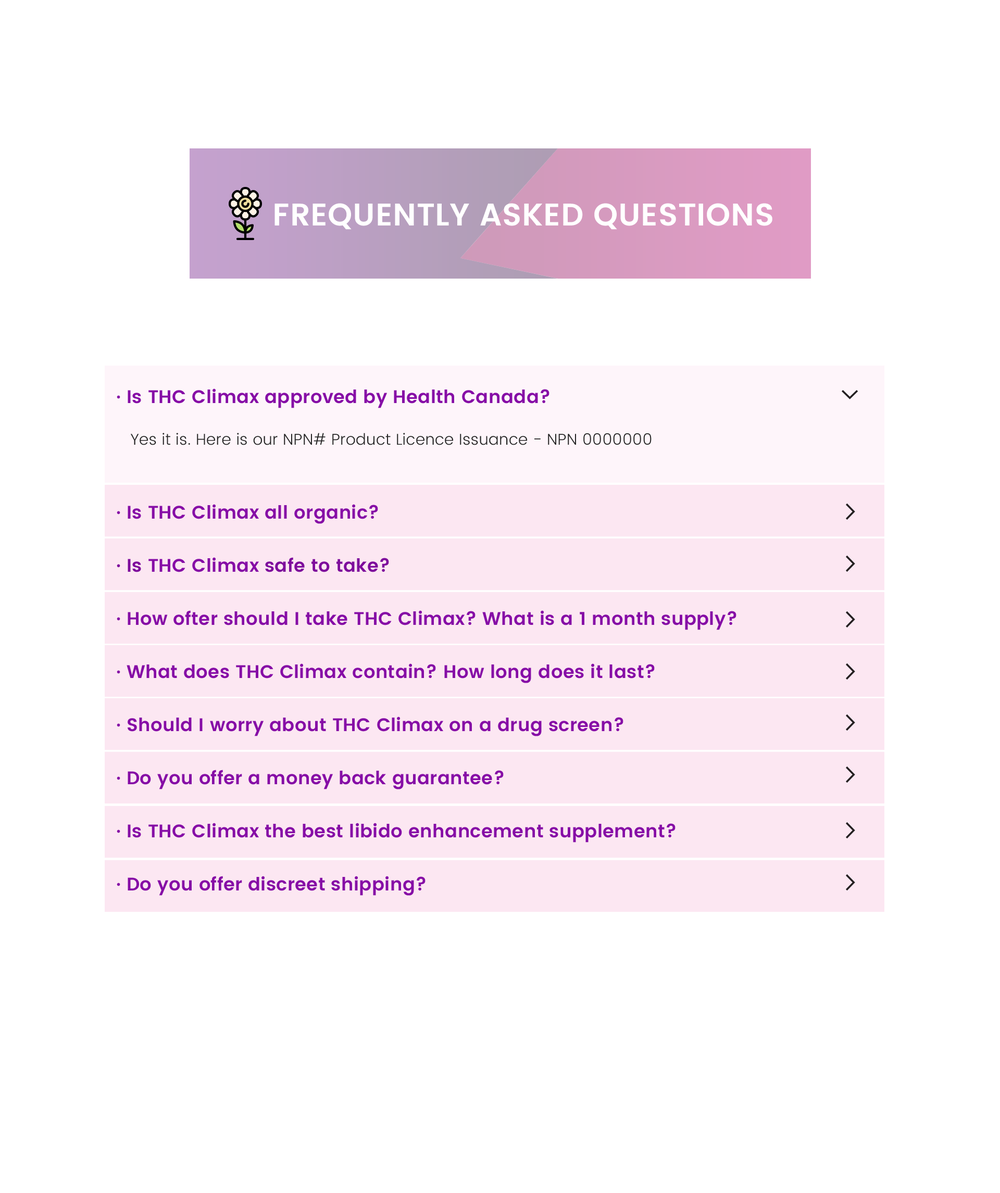
<style>
.page{position:relative;width:1000px;height:1193px;background:#ffffff}
.page>*{position:absolute;margin:0}
.t1{font:31.2px "Poppins-SemiBold";letter-spacing:0.01em;color:#ffffff}
.t2{font:18.2px/53.1px "Poppins-SemiBold";letter-spacing:0.01em;color:#860da6}
.t3{font:18.2px/36.5px "Poppins-SemiBold";letter-spacing:0.01em;color:#860da6}
.t4{font:15.6px/20.8px "Poppins-Light";letter-spacing:0.01em;color:#252525}
.t5{font:18.2px/51.6px "Poppins-SemiBold";letter-spacing:0.01em;color:#860da6}
.t6{font:18.2px/53.1px "Poppins-SemiBold";letter-spacing:0.01em;color:#7e0c9c}
</style>
<div class="page">
<p class="t1" style="left:274px;top:203px;width:498px;height:27px">FREQUENTLY ASKED QUESTIONS</p>
<p class="t2" style="left:117px;top:388px;width:619px;height:508px"><span class="t3">· Is THC Climax approved by Health Canada?<br><br></span><span class="t4">   Yes it is. Here is our NPN# Product Licence Issuance - NPN 0000000<br><br></span><span class="t5">·</span> Is THC Climax all organic?<br><span class="t6">· Is </span>THC Climax<span class="t6"> safe to take?<br></span>· How ofter should I take THC Climax? What is a 1 month supply?<br>· What does THC Climax contain? How long does it last?<br>· Should I worry about THC Climax on a drug screen?<br>· Do you offer a money back guarantee?<br>· Is THC Climax the best libido enhancement supplement?<br>· Do you offer discreet shipping?</p>
</div>
